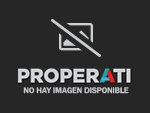
<style>
.page{position:relative;width:150px;height:113px;background:#262626}
.page>*{position:absolute;margin:0}
.t1{font:8.3px "FranklinGothic-Medium";color:#cdced0}
</style>
<div class="page">
<p class="t1" style="left:23px;top:87px;width:106px;height:7px">NO HAY IMAGEN DISPONIBLE</p>
</div>
